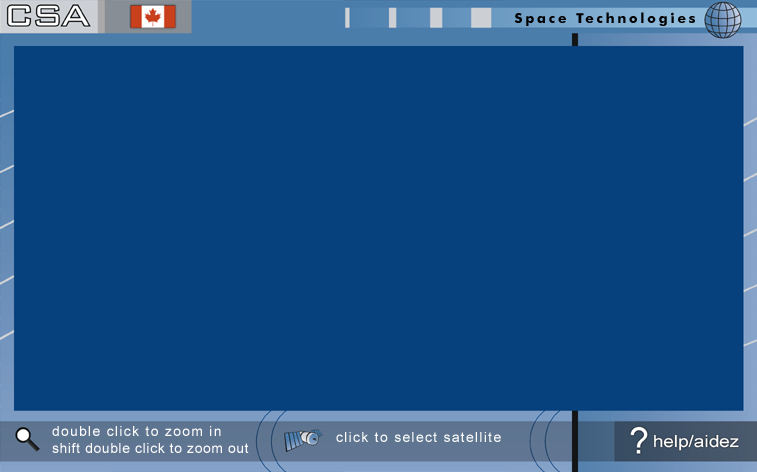
<style>
.page{position:relative;width:757px;height:472px;background:#07417d}
.page>*{position:absolute;margin:0}
.t1{font:13.8px "FuturaBT-Bold";letter-spacing:0.2em;color:#000000}
.t2{font:13.8px "ArialMT";letter-spacing:0.05em;color:#fcfcfc}
.t3{font:13.8px "ArialMT";letter-spacing:0.1em;color:#fcfcfc}
</style>
<div class="page">
<p class="t1" style="left:495px;top:7px;width:223px;height:23px">Space Technologies</p>
<p class="t2" style="left:52px;top:426px;width:197px;height:27px"><span class="t3">double click to zoom in<br></span>shift double click to zoom out</p>
<p class="t3" style="left:336px;top:432px;width:165px;height:10px">click to select satellite</p>
</div>
